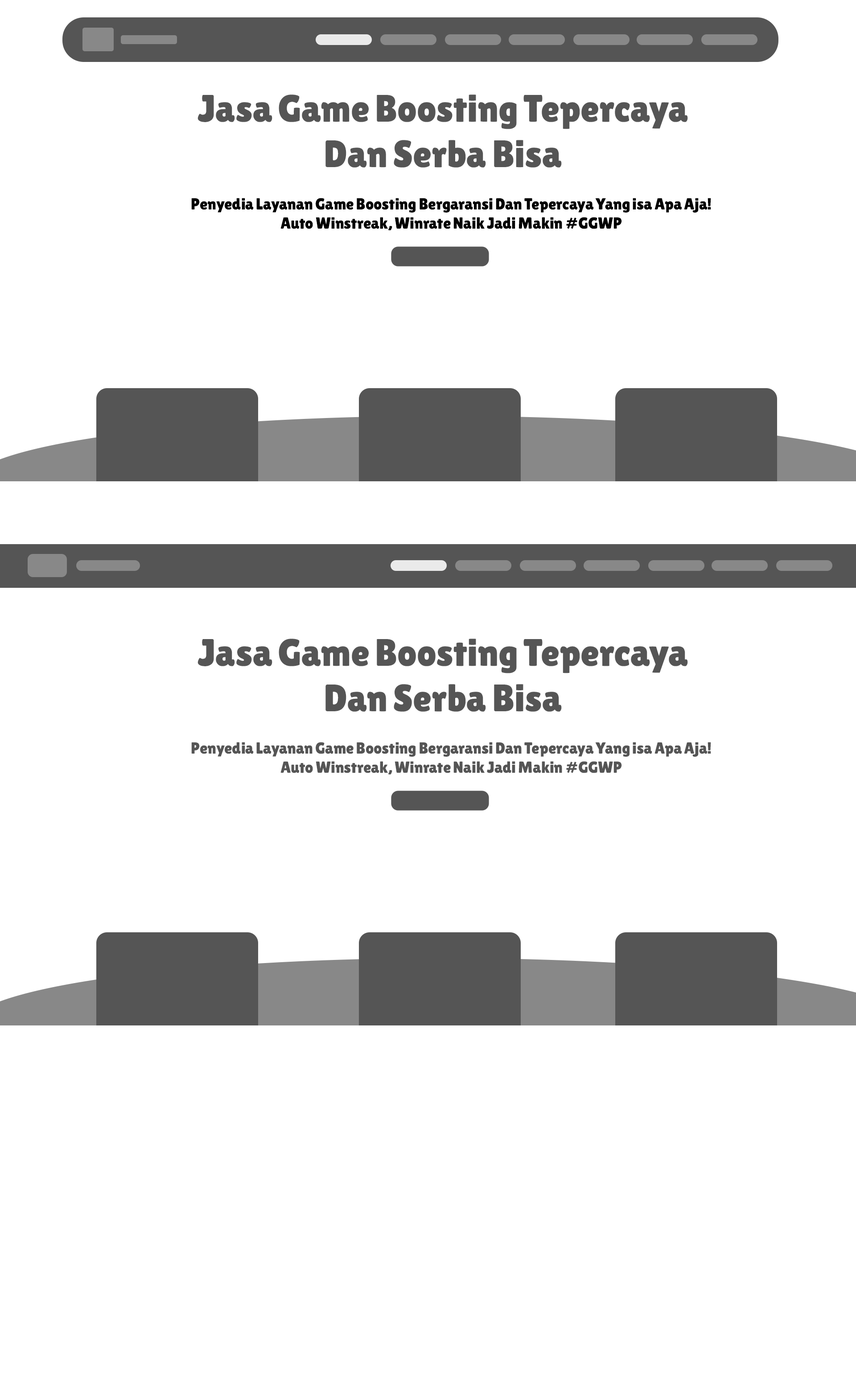
<style>
.page{position:relative;width:856px;height:1394px;background:#ffffff}
.page>*{position:absolute;margin:0}
.t1{font:38.2px "LilitaOne";letter-spacing:-0.025em;color:#555555}
.t2{font:16px "LilitaOne";letter-spacing:-0.025em;color:#000000}
.t3{font:16px "LilitaOne";letter-spacing:-0.025em;color:#555555}
</style>
<div class="page">
<p class="t1" style="left:197px;top:94px;width:491px;height:74px;text-align:center">Jasa Game Boosting Tepercaya<br>Dan Serba Bisa</p>
<p class="t2" style="left:191px;top:198px;width:520px;height:32px;text-align:center">Penyedia Layanan Game Boosting Bergaransi Dan Tepercaya Yang isa Apa Aja!<br>Auto Winstreak, Winrate Naik Jadi Makin #GGWP</p>
<p class="t1" style="left:197px;top:639px;width:491px;height:73px;text-align:center">Jasa Game Boosting Tepercaya<br>Dan Serba Bisa</p>
<p class="t3" style="left:191px;top:742px;width:520px;height:32px;text-align:center">Penyedia Layanan Game Boosting Bergaransi Dan Tepercaya Yang isa Apa Aja!<br>Auto Winstreak, Winrate Naik Jadi Makin #GGWP</p>
</div>
